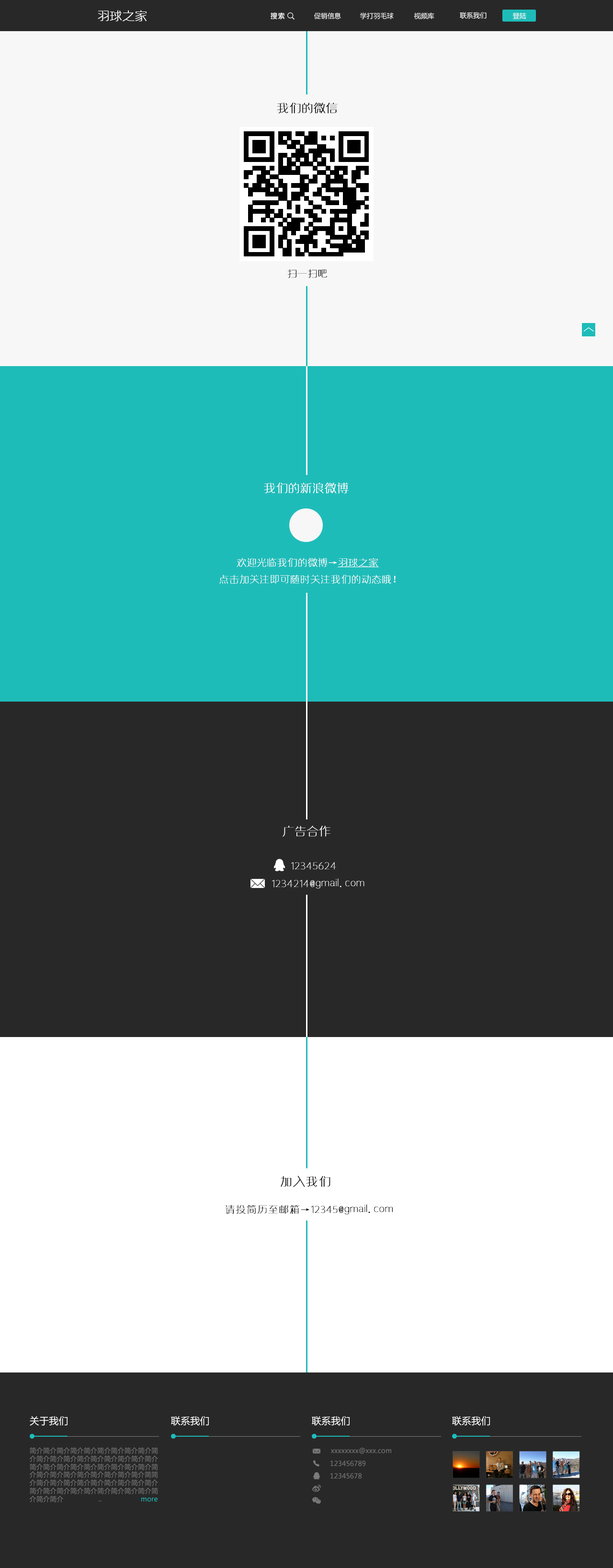
<style>
.page{position:relative;width:613px;height:1568px;background:#282828}
.page>*{position:absolute;margin:0}
.t1{font:12px "huxiaobo-meixin";color:#ffffff;font-weight:bold}
.t2{font:6.7px "MicrosoftYaHei";letter-spacing:0.1em;color:#ffffff}
.t3{font:6.7px "MicrosoftYaHei";color:#ffffff}
.t4{font:11.5px "huxiaobo-meixin";letter-spacing:0.01em;color:#000000;font-weight:bold}
.t5{font:9.6px "huxiaobo-meixin";letter-spacing:0.01em;color:#000000;font-weight:bold}
.t6{font:11.5px "huxiaobo-meixin";letter-spacing:0.01em;color:#ffffff;font-weight:bold}
.t7{font:9.6px "huxiaobo-meixin";letter-spacing:0.01em;color:#ffffff;font-weight:bold}
.t8{font:9.6px "huxiaobo-meixin";letter-spacing:0.01em;color:#ffffff;font-weight:bold;text-decoration:underline}
.t9{font:9.6px "huxiaobo-meixin";letter-spacing:0.075em;color:#ffffff;font-weight:bold}
.t10{font:11.5px "huxiaobo-meixin";letter-spacing:0.075em;color:#000000;font-weight:bold}
.t11{font:9.6px "huxiaobo-meixin";letter-spacing:0.075em;color:#000000;font-weight:bold}
.t12{font:9.6px "MicrosoftYaHei";letter-spacing:0.01em;color:#ffffff}
.t13{font:6.7px "MicrosoftYaHei";letter-spacing:0.01em;color:#7b7b7b}
.t14{font:6.7px "MicrosoftYaHei";letter-spacing:0.01em;color:#1ebcb9}
</style>
<div class="page">
<p class="t1" style="left:98px;top:10px;width:49px;height:12px">羽球之家</p>
<p class="t2" style="left:271px;top:12px;width:14px;height:8px">搜索</p>
<p class="t3" style="left:314px;top:12px;width:27px;height:7px">促销信息</p>
<p class="t3" style="left:360px;top:12px;width:34px;height:7px">学打羽毛球</p>
<p class="t3" style="left:414px;top:12px;width:21px;height:7px">视频库</p>
<p class="t3" style="left:460px;top:12px;width:27px;height:7px">联系我们</p>
<p class="t3" style="left:513px;top:12px;width:14px;height:7px">登陆</p>
<p class="t4" style="left:277px;top:103px;width:61px;height:11px">我们的微信</p>
<p class="t5" style="left:288px;top:269px;width:39px;height:9px">扫一扫吧</p>
<p class="t6" style="left:264px;top:483px;width:85px;height:11px">我们的新浪微博</p>
<p class="t7" style="left:237px;top:558px;width:142px;height:9px">欢迎光临我们的微博→<span class="t8">羽球之家</span></p>
<p class="t7" style="left:219px;top:575px;width:177px;height:9px">点击加关注即可随时关注我们的动态哦！</p>
<p class="t6" style="left:282px;top:826px;width:49px;height:11px">广告合作</p>
<p class="t9" style="left:291px;top:862px;width:45px;height:8px">12345624</p>
<p class="t9" style="left:272px;top:878px;width:93px;height:11px">1234214@gmail.com</p>
<p class="t10" style="left:281px;top:1176px;width:50px;height:11px">加入我们</p>
<p class="t11" style="left:225px;top:1204px;width:168px;height:11px">请投简历至邮箱→12345@gmail.com</p>
<p class="t12" style="left:30px;top:1416px;width:38px;height:10px">关于我们</p>
<p class="t12" style="left:171px;top:1416px;width:38px;height:10px">联系我们</p>
<p class="t12" style="left:312px;top:1416px;width:38px;height:10px">联系我们</p>
<p class="t12" style="left:452px;top:1416px;width:38px;height:10px">联系我们</p>
<p class="t13" style="left:29px;top:1447px;width:129px;height:55px">简介简介简介简介简介简介简介简介简介简<br>介简介简介简介简介简介简介简介简介简介<br>简介简介简介简介简介简介简介简介简介简<br>介简介简介简介简介简介简介简介简介简简<br>介简介简介简介简介简介简介简介简介简介<br>简介简介简介简介简介简介简介简介简介简<br>介简介简介                 ..                   <span class="t14">more</span></p>
<p class="t13" style="left:331px;top:1448px;width:61px;height:6px">xxxxxxxx@xxx.com</p>
<p class="t13" style="left:331px;top:1461px;width:35px;height:5px">123456789</p>
<p class="t13" style="left:331px;top:1473px;width:31px;height:6px">12345678</p>
</div>
